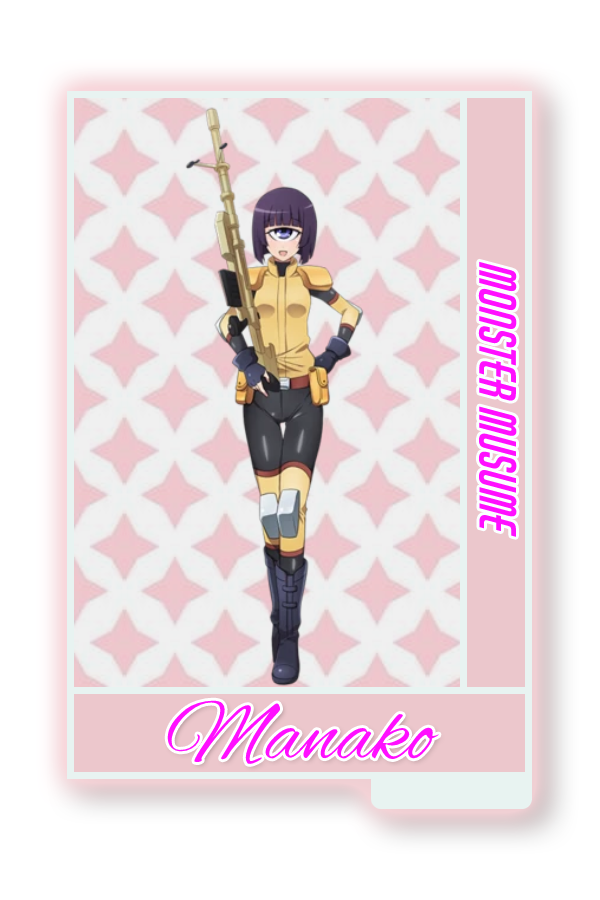
<style>
.page{position:relative;width:600px;height:900px;background:#ffffff}
.page>*{position:absolute;margin:0}
.t1{font:48.8px "AirAmerica-Regular";color:#ff0fff}
.t2{font:88px "AlexBrush-Regular";color:#ff0fff}
</style>
<div class="page">
<p class="t1" style="left:478px;top:261px;width:39px;height:276px;rotate:90deg">Monster Musume</p>
<p class="t2" style="left:167px;top:700px;width:272px;height:64px">Manako</p>
</div>
